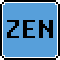
<style>
.page{position:relative;width:60px;height:60px;background:#579fda}
.page>*{position:absolute;margin:0}
.t1{font:29px "Fixedsys";color:#000000}
</style>
<div class="page">
<p class="t1" style="left:7px;top:20px;width:46px;height:18px">ZEN</p>
</div>
